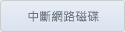
<style>
.page{position:relative;width:125px;height:32px}
.page>*{position:absolute;margin:0}
.t1{font:12px "MicrosoftJhengHeiRegular";color:#66717e}
</style>
<div class="page">
<p class="t1" style="left:28px;top:11px;width:71px;height:11px">中斷網路磁碟</p>
</div>
